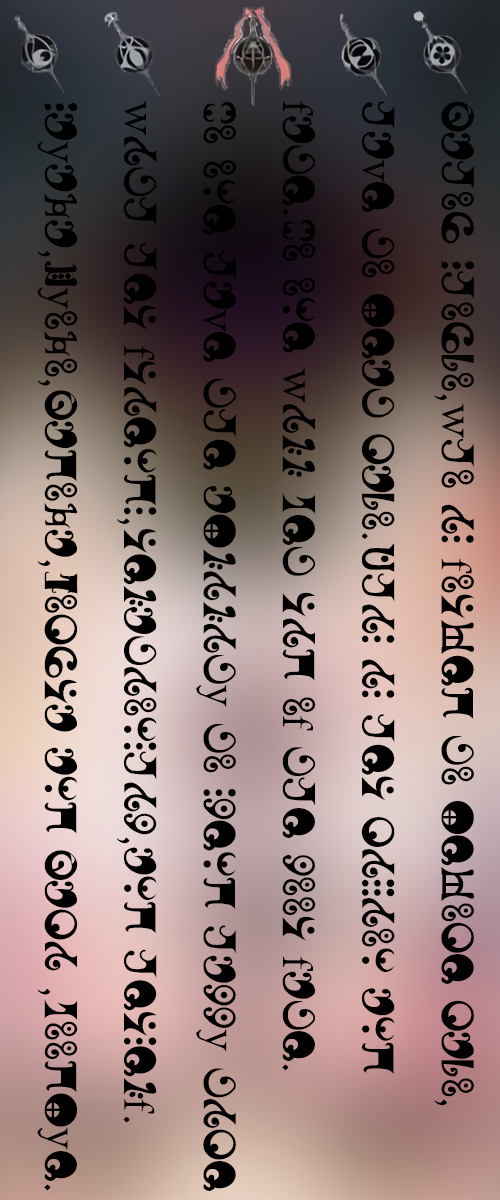
<style>
.page{position:relative;width:500px;height:1200px}
.page>*{position:absolute;margin:0}
.t1{font:45.3px "MadokaRunes";color:#000000}
</style>
<div class="page">
<p class="t1" style="left:37px;top:101px;width:437px;height:1090px">Mahou Shoujo,who is forced to become majo,<br>have to beat majo.This is her mission and <br>fate.No one will get rid of the poor fate.<br>No one have the ablility to spend happy time<br>with her friends,relationship,and herself.<br>Sayaka,Kyoko,Madoka,Homura and Mami ,goodbye.</p>
</div>
